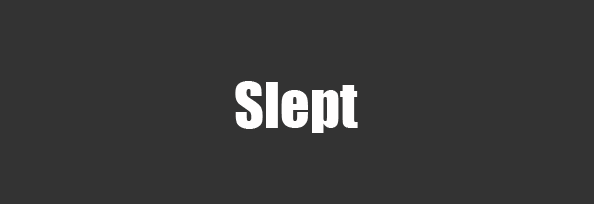
<style>
.page{position:relative;width:594px;height:204px;background:#333333}
.page>*{position:absolute;margin:0}
.t1{font:58.3px "Impact";color:#fffefe}
</style>
<div class="page">
<p class="t1" style="left:235px;top:81px;width:123px;height:52px">Slept</p>
</div>
